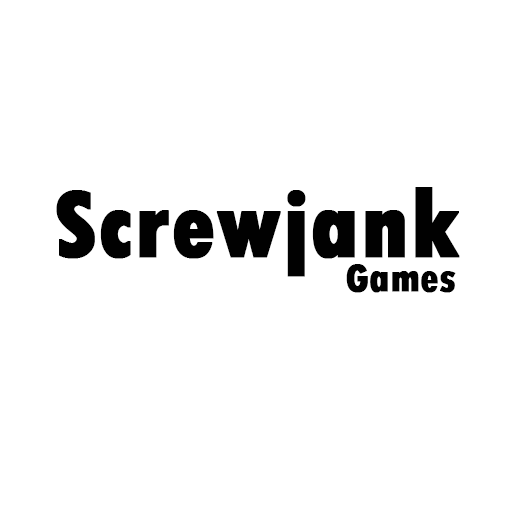
<style>
.page{position:relative;width:512px;height:512px;background:#ffffff}
.page>*{position:absolute;margin:0}
.t1{font:100px "TwCenMT-CondensedExtraBold";color:#010101;font-weight:bold}
.t2{font:41.7px "TwCenMT-CondensedExtraBold";color:#010101;font-weight:bold}
</style>
<div class="page">
<p class="t1" style="left:56px;top:187px;width:404px;height:90px">Screwjank</p>
<p class="t2" style="left:346px;top:264px;width:110px;height:29px">Games</p>
</div>
